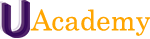
<style>
.page{position:relative;width:150px;height:39px;background:#ffffff}
.page>*{position:absolute;margin:0}
.t1{font:28.3px "Century";color:#ffa500}
</style>
<div class="page">
<p class="t1" style="left:30px;top:9px;width:121px;height:27px">Academy</p>
</div>
